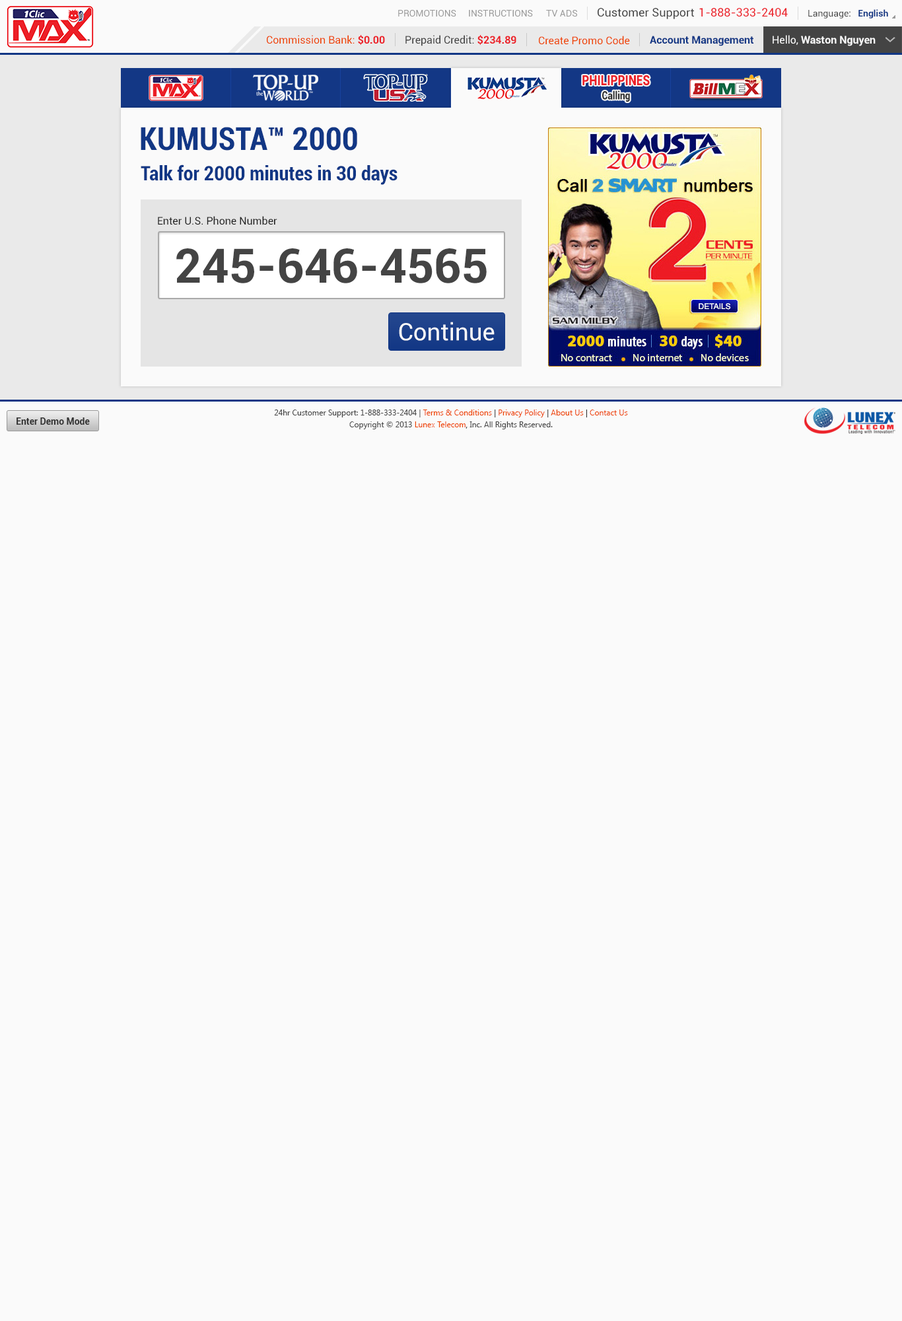
<style>
.page{position:relative;width:902px;height:1321px;background:#fafafa}
.page>*{position:absolute;margin:0}
.t1{font:9.2px "Roboto-Regular";color:#999999}
.t2{font:11.6px "Roboto-Regular";color:#444444}
.t3{font:11.6px "Roboto-Regular";color:#ec2029}
.t4{font:9.2px "Roboto-Regular";color:#444444}
.t5{font:9.2px "Roboto-Bold";color:#123785}
.t6{font:10.6px "Roboto-Regular";color:#ee4400}
.t7{font:10.6px "Roboto-Bold";color:#ec2028}
.t8{font:10.6px "Roboto-Regular";color:#444444}
.t9{font:10.6px "Roboto-Bold";color:#123785}
.t10{font:10.6px "Roboto-Bold";color:#fafafa}
.t11{font:10.6px "Roboto-Regular";color:#fafafa}
.t12{font:14.1px "Roboto-Black";color:#ec2028;scale:0.81 1}
.t13{font:11.3px "Roboto-Black";color:#333333;scale:0.81 1}
.t14{font:31.7px "Roboto-BoldCondensed";color:#123785}
.t15{font:19.8px "Roboto-BoldCondensed";color:#123785}
.t16{font:10.6px "Roboto-Regular";color:#222222}
.t17{font:47.6px "Roboto-Bold";color:#444444}
.t18{font:23.9px "Roboto-Regular";color:#fafafa}
.t19{font:7.9px/11.9px "SegoeUI";color:#444444}
.t20{font:7.9px/11.9px "SegoeUI";color:#ee4400}
.t21{font:7.9px/11.9px "SegoeUI";color:#333333}
.t22{font:9.2px "Roboto-Bold";color:#333333}
</style>
<div class="page">
<p class="t1" style="left:398px;top:10px;width:59px;height:7px">PROMOTIONS</p>
<p class="t1" style="left:469px;top:10px;width:64px;height:7px">INSTRUCTIONS</p>
<p class="t1" style="left:546px;top:10px;width:31px;height:7px">TV ADS</p>
<p class="t2" style="left:598px;top:8px;width:96px;height:11px">Customer Support</p>
<p class="t3" style="left:700px;top:8px;width:88px;height:9px">1-888-333-2404</p>
<p class="t4" style="left:809px;top:9px;width:80px;height:9px">Language:   <span class="t5">English</span></p>
<p class="t6" style="left:267px;top:35px;width:118px;height:10px">Commission Bank: <span class="t7">$0.00</span></p>
<p class="t8" style="left:406px;top:35px;width:111px;height:11px">Prepaid Credit: <span class="t7">$234.89</span></p>
<p class="t6" style="left:539px;top:36px;width:91px;height:9px">Create Promo Code</p>
<p class="t9" style="left:650px;top:36px;width:104px;height:10px">Account Management</p>
<p class="t10" style="left:773px;top:35px;width:103px;height:11px"><span class="t11">Hello, </span>Waston Nguyen</p>
<p class="t12" style="left:583px;top:75px;width:67px;height:11px">PHILIPPINES</p>
<p class="t13" style="left:603px;top:91px;width:27px;height:11px">Calling</p>
<p class="t14" style="left:141px;top:127px;width:216px;height:24px">KUMUSTA™ 2000</p>
<p class="t15" style="left:141px;top:165px;width:257px;height:20px">Talk for 2000 minutes in 30 days</p>
<p class="t16" style="left:158px;top:216px;width:119px;height:9px">Enter U.S. Phone Number</p>
<p class="t17" style="left:176px;top:248px;width:311px;height:35px">245-646-4565</p>
<p class="t18" style="left:399px;top:322px;width:96px;height:19px">Continue</p>
<p class="t19" style="left:274px;top:410px;width:354px;height:19px;text-align:center">24hr Customer Support: 1-888-333-2404 | <span class="t20">Terms &amp; Conditions</span><span class="t21"> | </span><span class="t20">Privacy Policy</span><span class="t21"> | </span><span class="t20">About Us</span><span class="t21"> | </span><span class="t20">Contact Us<br></span>Copyright © 2013 <span class="t20">Lunex Telecom</span><span class="t21">,</span> Inc. All Rights Reserved.</p>
<p class="t22" style="left:17px;top:418px;width:73px;height:7px">Enter Demo Mode</p>
</div>
